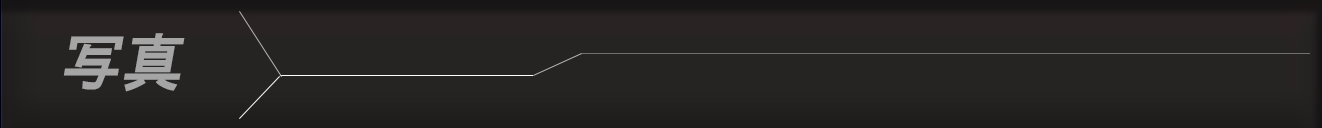
<style>
.page{position:relative;width:1322px;height:128px;background:#262323}
.page>*{position:absolute;margin:0}
.t1{font:61px "HGPGothicE";color:#a6a5a5;font-style:italic}
</style>
<div class="page">
<p class="t1" style="left:63px;top:33px;width:122px;height:59px">写真</p>
</div>
